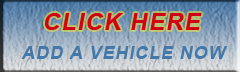
<style>
.page{position:relative;width:240px;height:72px}
.page>*{position:absolute;margin:0}
.t1{font:24px "Arial-BoldMT";letter-spacing:0.05em;color:#cf0014;text-transform:uppercase;font-style:italic}
.t2{font:18px "Arial-BoldMT";letter-spacing:0.05em;color:#4378a8;text-transform:uppercase;font-style:italic}
</style>
<div class="page">
<p class="t1" style="left:44px;top:13px;width:158px;height:17px">CLICK HERE</p>
<p class="t2" style="left:21px;top:46px;width:207px;height:13px">Add a vehicle Now</p>
</div>
